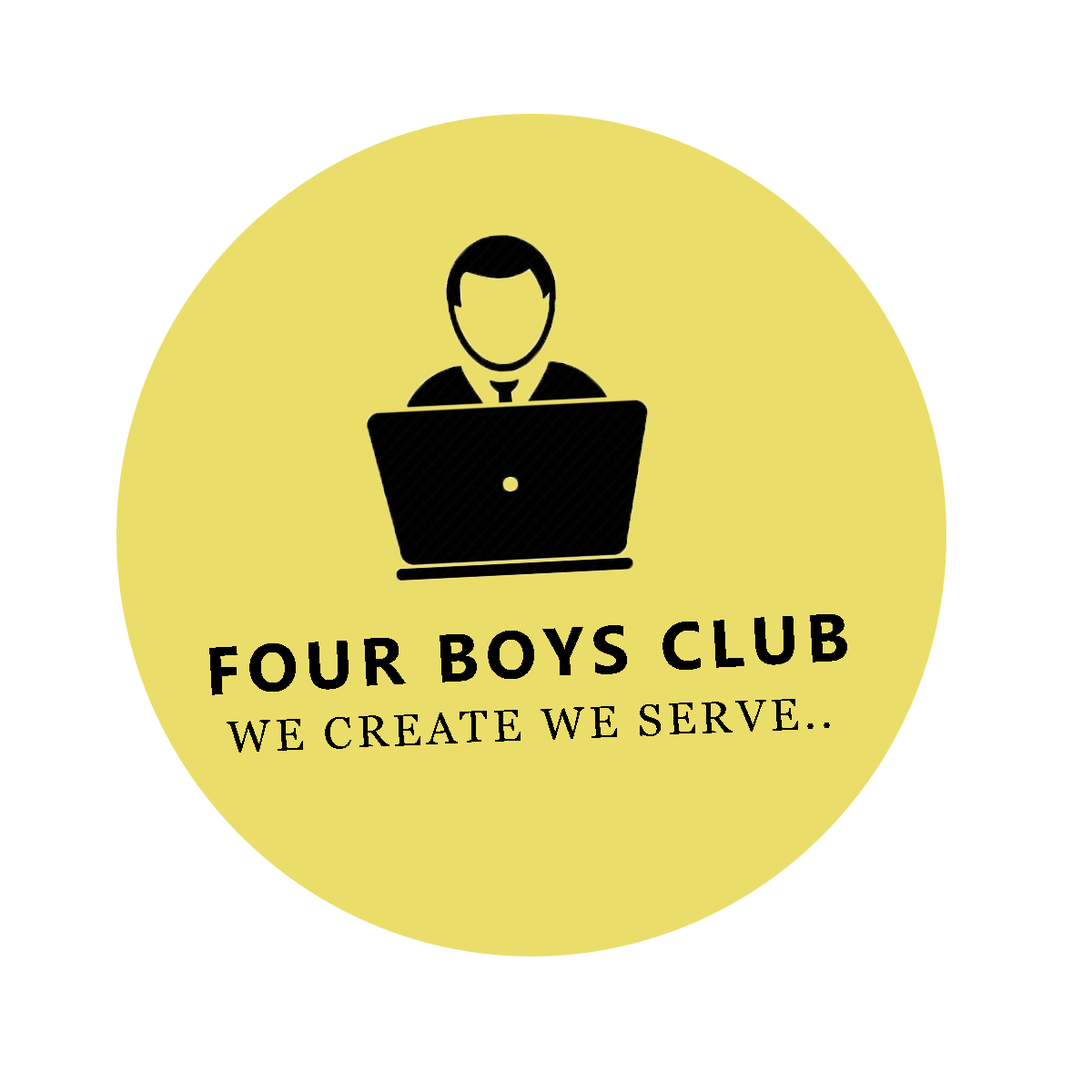
<style>
.page{position:relative;width:1092px;height:1092px;background:#ffffff}
.page>*{position:absolute;margin:0}
.t1{font:67.3px "Gadugi-Bold";letter-spacing:0.1em;color:#000000;text-transform:uppercase}
.t2{font:44.6px "Georgia";letter-spacing:0.1em;color:#000000;text-transform:uppercase}
</style>
<div class="page">
<p class="t1" style="left:209px;top:614px;width:638px;height:81px;rotate:-3deg">FOUR BOYS CLUB</p>
<p class="t2" style="left:227px;top:699px;width:603px;height:54px;rotate:-2deg">WE CREATE WE SERVE..</p>
</div>
